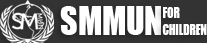
<style>
.page{position:relative;width:207px;height:43px;background:#ffffff}
.page>*{position:absolute;margin:0}
.t1{font:37.3px "Impact";color:#ffffff;scale:0.9 1}
.t2{font:13.9px "Impact";color:#ffffff;scale:0.84 1}
</style>
<div class="page">
<p class="t1" style="left:60px;top:6px;width:101px;height:29px">SMMUN</p>
<p class="t2" style="left:162px;top:7px;width:45px;height:28px">FOR<br>CHILDREN</p>
</div>
